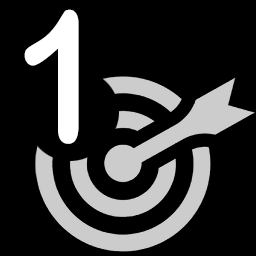
<style>
.page{position:relative;width:256px;height:256px;background:#000000}
.page>*{position:absolute;margin:0}
.t1{font:182.4px "ArialRoundedMTBold";letter-spacing:-0.4em;color:#ffffff;font-variant:small-caps;scale:0.83 1}
</style>
<div class="page">
<p class="t1" style="left:24px;top:9px;width:55px;height:135px">1</p>
</div>
